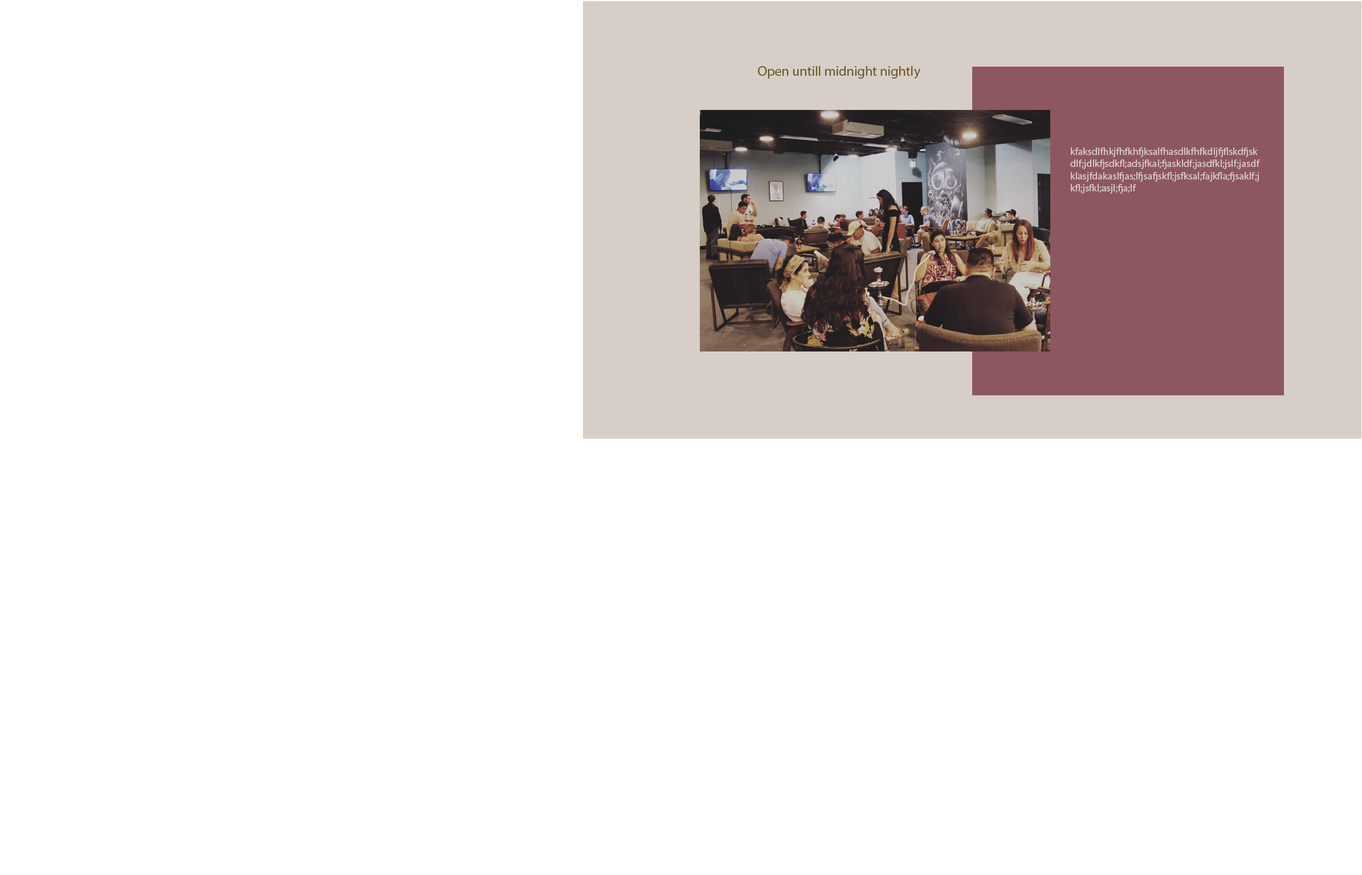
<style>
.page{position:relative;width:1362px;height:875px;background:#ffffff}
.page>*{position:absolute;margin:0}
.t1{font:13.7px "MyriadPro-Regular";color:#6b5724}
.t2{font:10.3px "MyriadPro-Regular";color:#d7cec7}
.t3{font:10.3px "MyriadPro-Regular";color:#6b5724}
</style>
<div class="page">
<p class="t1" style="left:758px;top:66px;width:162px;height:13px">Open untill midnight nightly</p>
<p class="t2" style="left:1070px;top:148px;width:190px;height:46px"><span class="t3"><br><br></span><br>kfaksdlfhkjfhfkhfjksalfhasdlkfhfkdljfjflskdfjskdlf;jdlkfjsdkfl;adsjfkal;fjaskldf;jasdfkl;jslf;jasdfklasjfdakaslfjas;lfjsafjskfl;jsfksal;fajkfla;fjsaklf;jkfl;jsfkl;asjl;fja;lf</p>
</div>
